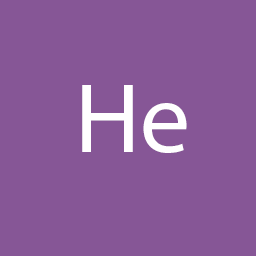
<style>
.page{position:relative;width:256px;height:256px;background:#865696}
.page>*{position:absolute;margin:0}
.t1{font:100px "MyriadPro-Regular";color:#ffffff}
</style>
<div class="page">
<p class="t1" style="left:82px;top:85px;width:105px;height:68px">He</p>
</div>
